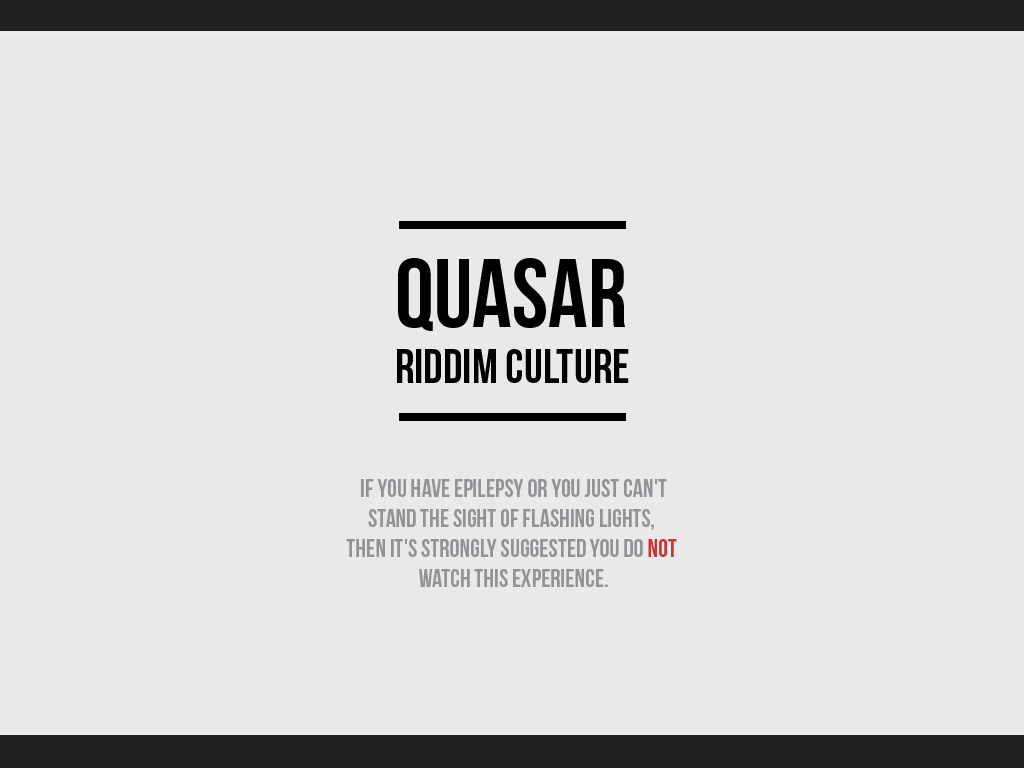
<style>
.page{position:relative;width:1024px;height:768px;background:#e9e9e9}
.page>*{position:absolute;margin:0}
.t1{font:97.2px "BebasNeue";color:#000000}
.t2{font:48px "BebasNeue";color:#000000}
.t3{font:25px "BebasNeue";color:#939397;text-transform:uppercase}
.t4{font:25px "BebasNeue";color:#cc3434;text-transform:uppercase}
</style>
<div class="page">
<p class="t1" style="left:398px;top:258px;width:228px;height:73px">QUASAR</p>
<p class="t1" style="left:398px;top:258px;width:228px;height:73px">QUASAR</p>
<p class="t2" style="left:397px;top:349px;width:232px;height:34px">RIDDIM CULTURE</p>
<p class="t3" style="left:346px;top:479px;width:331px;height:108px;text-align:center">if you have epilepsy or you just can't<br>stand the sight of flashing lights, <br>then it's strongly suggested you do <span class="t4">NOT <br></span>watch this experience.</p>
</div>
